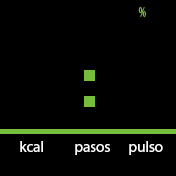
<style>
.page{position:relative;width:176px;height:176px;background:#000000}
.page>*{position:absolute;margin:0}
.t1{font:15px "MyriadPro-Regular";color:#ffffff}
</style>
<div class="page">
<p class="t1" style="left:20px;top:141px;width:23px;height:11px">kcal</p>
<p class="t1" style="left:75px;top:144px;width:35px;height:11px">pasos</p>
<p class="t1" style="left:129px;top:141px;width:34px;height:14px">pulso</p>
</div>
